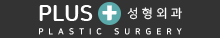
<style>
.page{position:relative;width:220px;height:38px;background:#333333}
.page>*{position:absolute;margin:0}
.t1{font:22px "NanumSquareRoundEB";color:#ffffff}
.t2{font:23.6px "TmonMonsoriBlack";letter-spacing:0.04em;color:#ffffff}
.t3{font:12px "NanumSquareR";letter-spacing:0.3em;color:#ffffff}
.t4{font:8px "NanumSquareR";letter-spacing:0.675em;color:#ffffff}
</style>
<div class="page">
<p class="t1" style="left:39px;top:5px;width:54px;height:16px">PLUS</p>
<p class="t2" style="left:102px;top:5px;width:15px;height:16px">+</p>
<p class="t3" style="left:127px;top:7px;width:55px;height:13px">성형외과</p>
<p class="t4" style="left:39px;top:28px;width:143px;height:7px">PLASTIC SURGERY</p>
</div>
